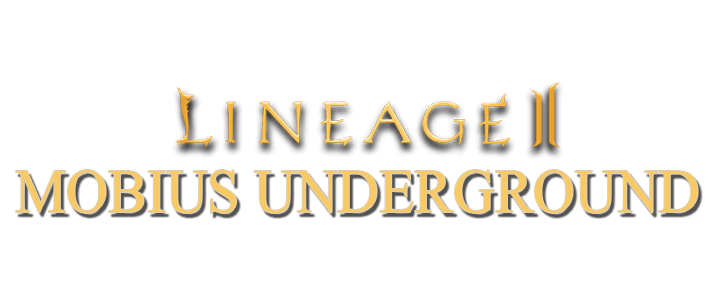
<style>
.page{position:relative;width:714px;height:304px;background:#ffffff}
.page>*{position:absolute;margin:0}
.t1{font:76.4px "Aparajita";color:#f9c964;scale:0.94 1}
</style>
<div class="page">
<p class="t1" style="left:15px;top:170px;width:683px;height:43px">MOBIUS UNDERGROUND</p>
</div>
